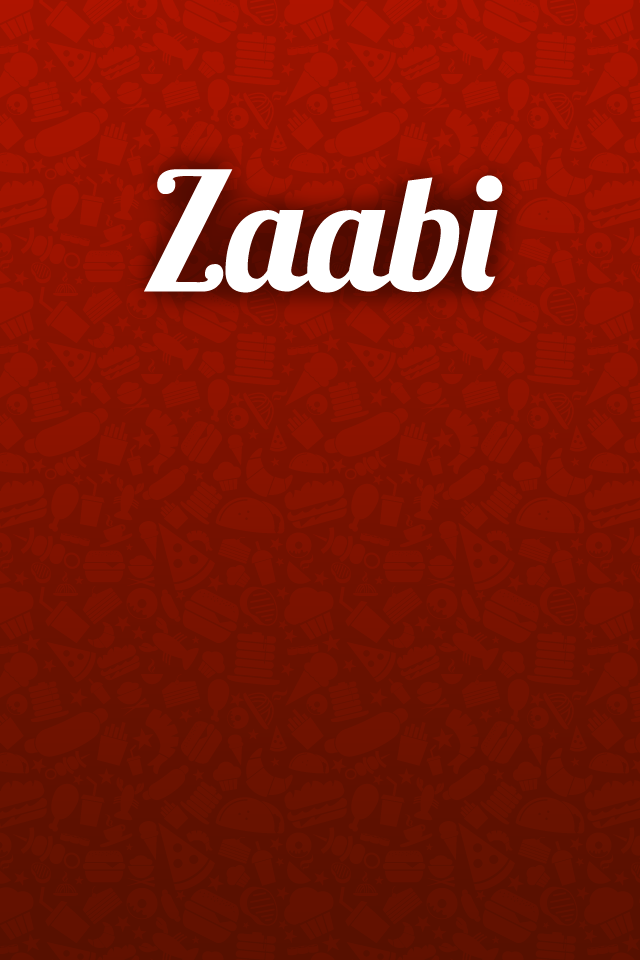
<style>
.page{position:relative;width:640px;height:960px}
.page>*{position:absolute;margin:0}
.t1{font:162.6px "Lobster1.3";color:#ffffff}
</style>
<div class="page">
<p class="t1" style="left:144px;top:169px;width:359px;height:124px">Zaabi</p>
</div>
